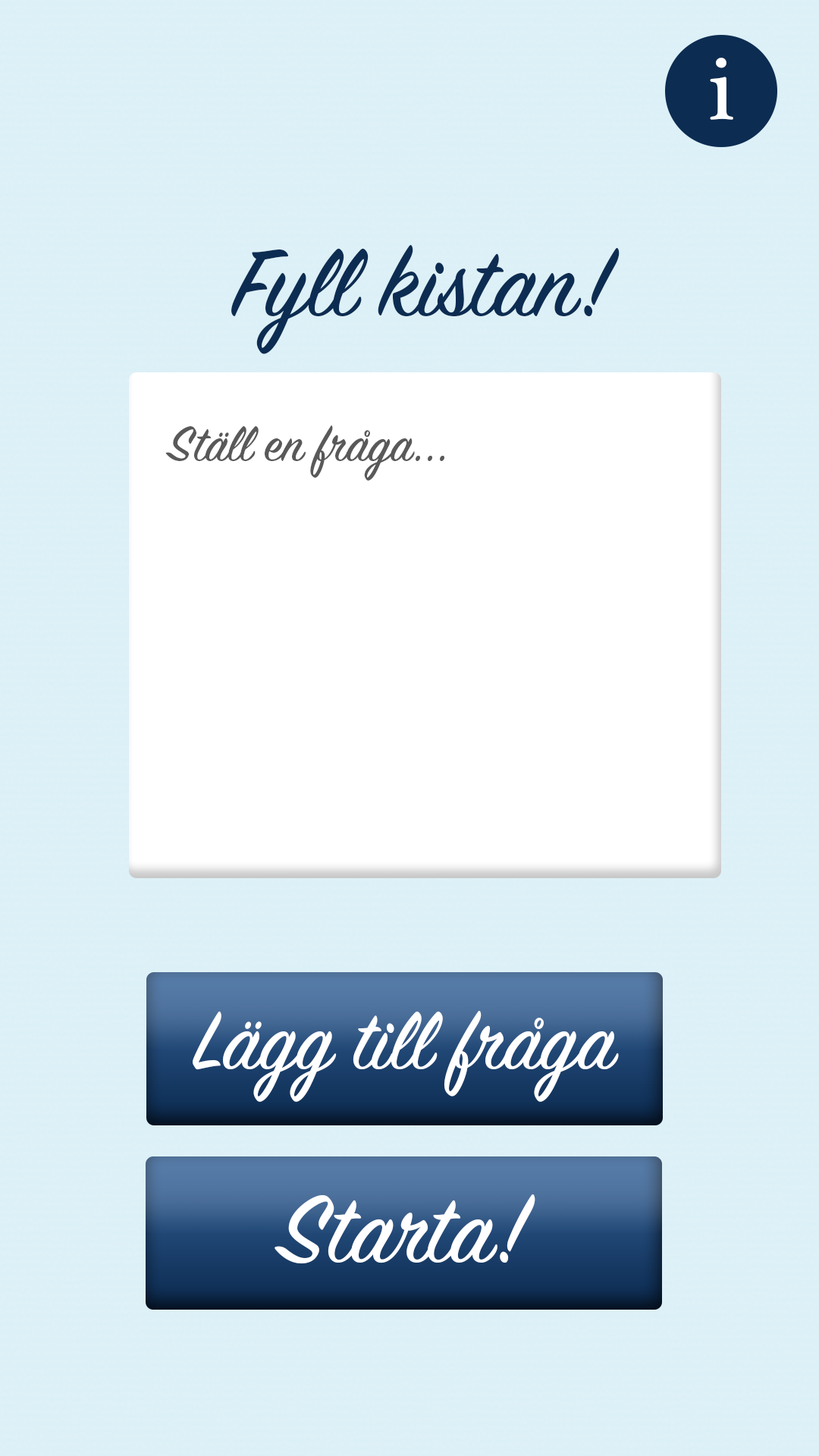
<style>
.page{position:relative;width:819px;height:1456px;background:#ffffff}
.page>*{position:absolute;margin:0}
.t1{font:91px "PlantagenetCherokee";color:#ffffff}
.t2{font:106.2px "SignPainter-HouseScript";color:#0c2c52}
.t3{font:54.6px "SignPainter-HouseScript";color:#595959}
.t4{font:91px "SignPainter-HouseScript";color:#ffffff}
.t5{font:106.2px "SignPainter-HouseScript";color:#ffffff}
</style>
<div class="page">
<p class="t1" style="left:710px;top:58px;width:23px;height:62px">i</p>
<p class="t2" style="left:231px;top:245px;width:389px;height:109px">Fyll kistan!</p>
<p class="t3" style="left:165px;top:425px;width:279px;height:56px">Ställ en fråga...</p>
<p class="t4" style="left:193px;top:1011px;width:426px;height:91px">Lägg till fråga</p>
<p class="t5" style="left:275px;top:1194px;width:260px;height:70px">Starta!</p>
</div>
